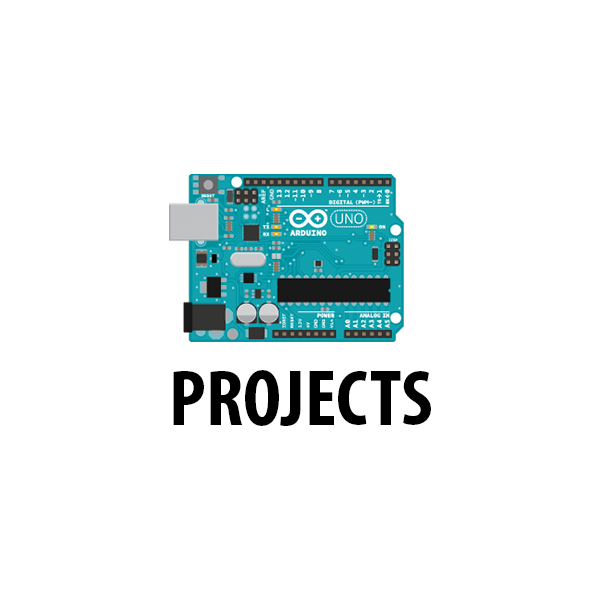
<style>
.page{position:relative;width:600px;height:600px;background:#ffffff}
.page>*{position:absolute;margin:0}
.t1{font:80px "MyriadPro-BoldCond";color:#000000}
</style>
<div class="page">
<p class="t1" style="left:173px;top:370px;width:258px;height:56px">PROJECTS</p>
</div>
